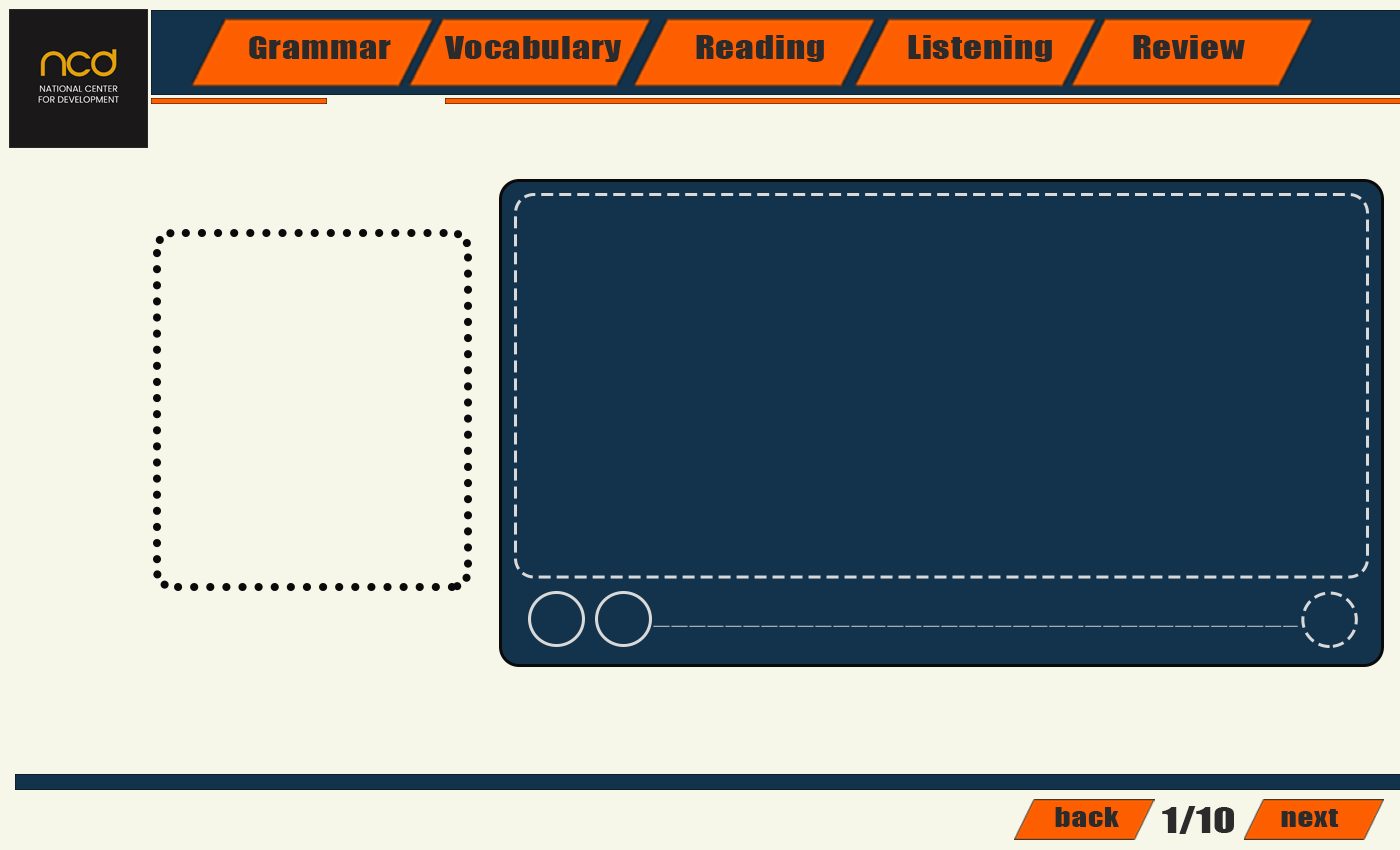
<style>
.page{position:relative;width:1400px;height:850px;background:#f6f6e9}
.page>*{position:absolute;margin:0}
.t1{font:29.2px "Impact";letter-spacing:0.02em;color:#2b2b2b;scale:1.25 1}
.t2{font:29.9px "Impact";letter-spacing:0.02em;color:#2b2b2b;scale:1.25 1}
.t3{font:25px "Impact";letter-spacing:0.02em;color:#2b2b2b;scale:1.25 1}
.t4{font:33.3px "Impact";letter-spacing:0.02em;color:#2b2b2b;scale:1.25 1}
</style>
<div class="page">
<p class="t1" style="left:249px;top:36px;width:142px;height:23px">Grammar</p>
<p class="t1" style="left:444px;top:36px;width:177px;height:26px">Vocabulary</p>
<p class="t2" style="left:696px;top:35px;width:128px;height:27px">Reading</p>
<p class="t2" style="left:908px;top:35px;width:144px;height:27px">Listening</p>
<p class="t2" style="left:1133px;top:35px;width:112px;height:24px">Review</p>
<p class="t3" style="left:1055px;top:807px;width:64px;height:20px">back</p>
<p class="t4" style="left:1162px;top:806px;width:72px;height:28px">1/10</p>
<p class="t3" style="left:1281px;top:809px;width:58px;height:18px">next</p>
</div>
